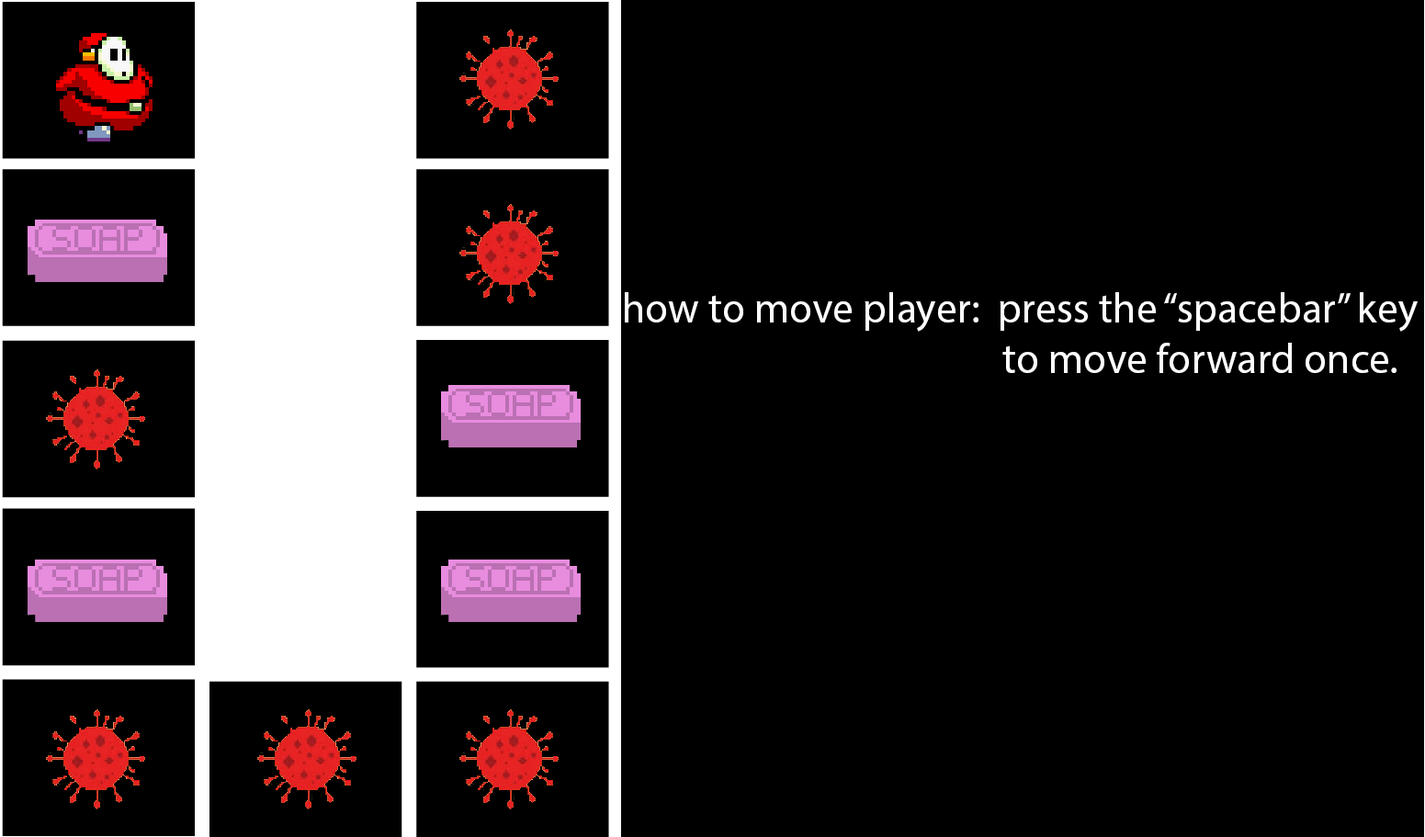
<style>
.page{position:relative;width:1425px;height:837px;background:#000000}
.page>*{position:absolute;margin:0}
.t1{font:42.3px "MyriadPro-Regular";color:#ffffff}
</style>
<div class="page">
<p class="t1" style="left:625px;top:292px;width:792px;height:81px">how to move player:  press the “spacebar” key<br>    to move forward once.</p>
</div>
